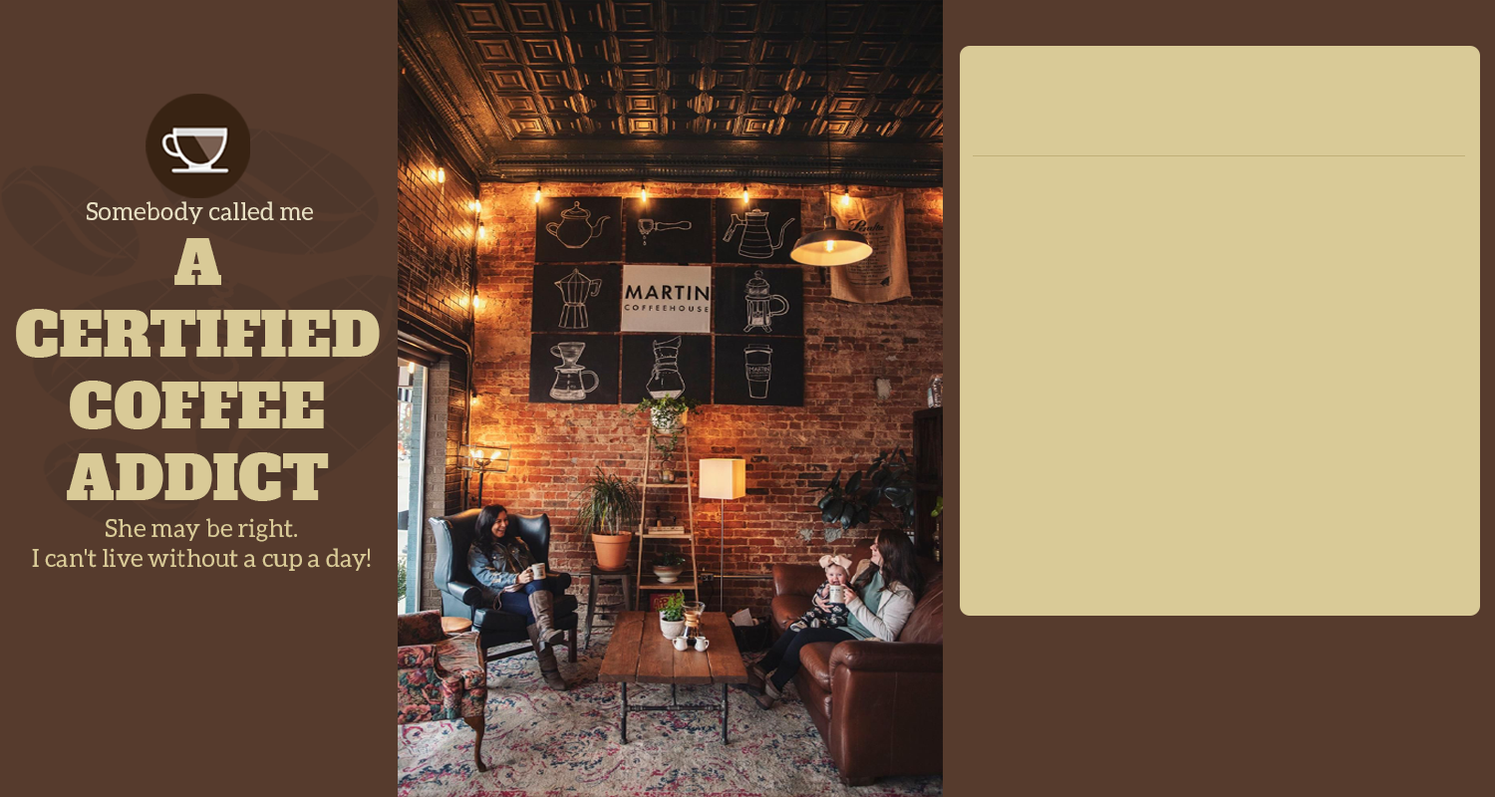
<style>
.page{position:relative;width:1495px;height:797px;background:#563b2d}
.page>*{position:absolute;margin:0}
.t1{font:24.9px "SVN-AleoRegular";color:#e8dfc2}
.t2{font:59.8px "AlfaSlabOne-Regular";color:#d9ca97}
.t3{font:24.9px "SVN-AleoRegular";color:#d9ca97}
</style>
<div class="page">
<p class="t1" style="left:87px;top:201px;width:226px;height:23px">Somebody called me</p>
<p class="t2" style="left:16px;top:238px;width:364px;height:263px;text-align:center">A<br>CERTIFIED<br>COFFEE<br>ADDICT</p>
<p class="t3" style="left:32px;top:518px;width:339px;height:53px;text-align:center">She may be right.<br>I can't live without a cup a day!</p>
</div>
